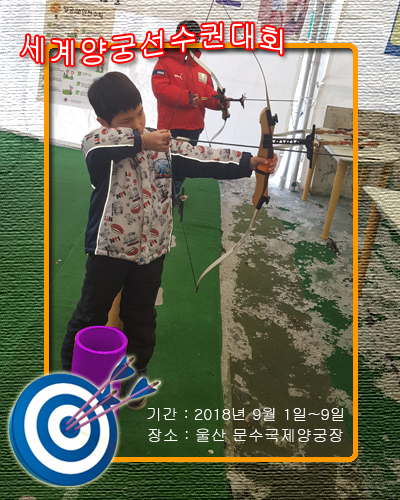
<style>
.page{position:relative;width:400px;height:500px}
.page>*{position:absolute;margin:0}
.t1{font:30px "Gulim";color:#ffffff}
.t2{font:16px "Gulim";color:#ffffff}
</style>
<div class="page">
<p class="t1" style="left:21px;top:22px;width:262px;height:44px">세계양궁선수권대회</p>
<p class="t2" style="left:147px;top:407px;width:197px;height:14px">기간 : 2018년 9월 1일~9일</p>
<p class="t2" style="left:148px;top:428px;width:195px;height:14px">장소 : 울산 문수국제양궁장</p>
</div>
